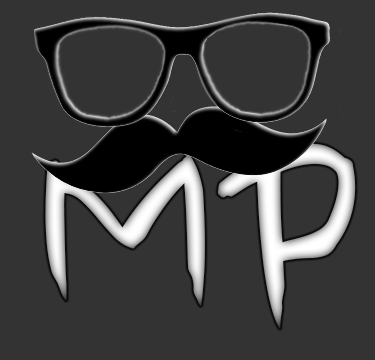
<style>
.page{position:relative;width:375px;height:360px;background:#333333}
.page>*{position:absolute;margin:0}
.t1{font:330px "NanumBrush"}
</style>
<div class="page">
<p class="t1" style="left:45px;top:143px;width:311px;height:186px">MP</p>
</div>
